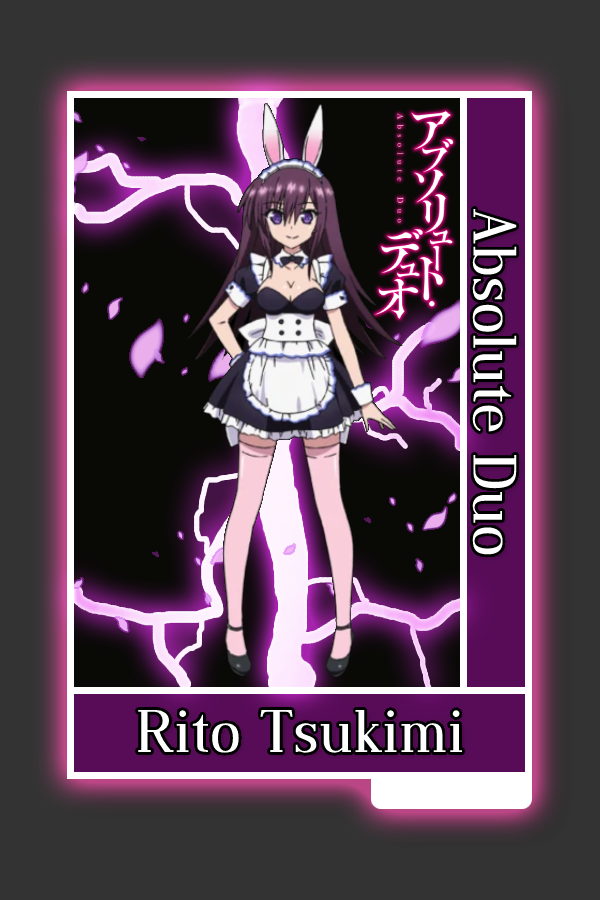
<style>
.page{position:relative;width:600px;height:900px;background:#333333}
.page>*{position:absolute;margin:0}
.t1{font:60px "DustismoRoman";color:#ffffff}
.t2{font:59px "DustismoRoman";color:#ffffff}
</style>
<div class="page">
<p class="t1" style="left:472px;top:208px;width:45px;height:347px;rotate:90deg">Absolute Duo</p>
<p class="t2" style="left:138px;top:709px;width:324px;height:44px">Rito Tsukimi</p>
</div>
